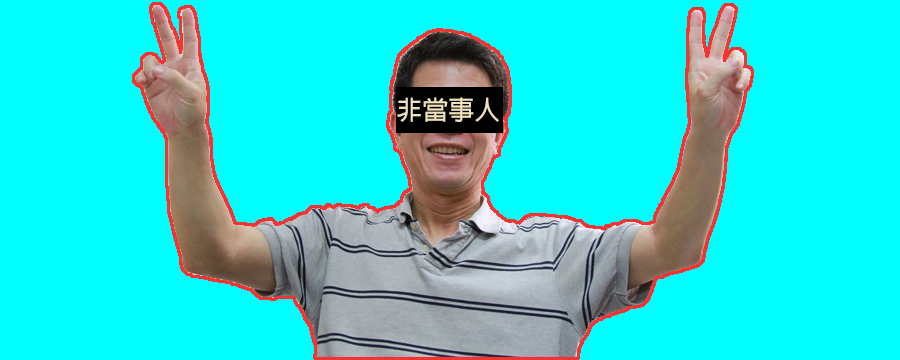
<style>
.page{position:relative;width:900px;height:360px;background:#00ffff}
.page>*{position:absolute;margin:0}
.t1{font:26px "AdobeFanHeitiStd-Bold";color:#efe2bb}
</style>
<div class="page">
<p class="t1" style="left:397px;top:97px;width:102px;height:25px">非當事人</p>
</div>
